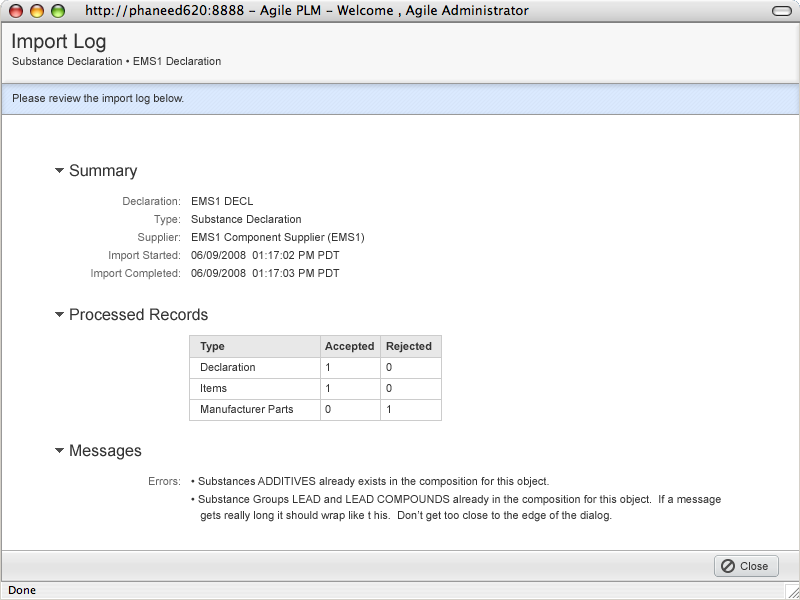
<style>
.page{position:relative;width:800px;height:600px;background:#ffffff}
.page>*{position:absolute;margin:0}
.t1{font:20px "ArialMT";color:#333333}
.t2{font:11px "ArialMT";color:#333333}
.t3{font:16px "ArialMT";color:#333333}
.t4{font:11px/18px "ArialMT";color:#666666}
.t5{font:11px/18px "ArialMT";color:#333333}
.t6{font:11px/21px "ArialMT";color:#333333}
.t7{font:11px/21px "Arial-BoldMT";color:#333333}
.t8{font:11px "ArialMT";color:#666666}
.t9{font:11px/16px "ArialMT";color:#333333}
</style>
<div class="page">
<p class="t1" style="left:12px;top:33px;width:94px;height:20px">Import Log</p>
<p class="t2" style="left:12px;top:57px;width:209px;height:8px">Substance Declaration • EMS1 Declaration</p>
<p class="t2" style="left:13px;top:94px;width:171px;height:11px">Please review the import log below.</p>
<p class="t3" style="left:69px;top:164px;width:69px;height:16px">Summary</p>
<p class="t4" style="left:91px;top:197px;width:89px;height:83px;text-align:right">Declaration:<br>Type:<br>Supplier:<br>Import Started:<br>Import Completed:</p>
<p class="t5" style="left:191px;top:197px;width:173px;height:80px">EMS1 DECL<br>Substance Declaration<br>EMS1 Component Supplier (EMS1)<br>06/09/2008  01:17:02 PM PDT<br>06/09/2008  01:17:03 PM PDT</p>
<p class="t3" style="left:70px;top:308px;width:138px;height:13px">Processed Records</p>
<p class="t6" style="left:200px;top:342px;width:93px;height:71px"><span class="t7">Type<br></span>Declaration<br>Items<br>Manufacturer Parts</p>
<p class="t7" style="left:325px;top:342px;width:49px;height:71px">Accepted<br><span class="t6">1<br>1<br>0</span></p>
<p class="t7" style="left:386px;top:342px;width:46px;height:71px">Rejected<br><span class="t6">0<br>0<br>1</span></p>
<p class="t3" style="left:70px;top:444px;width:72px;height:16px">Messages</p>
<p class="t8" style="left:149px;top:477px;width:31px;height:8px">Errors:</p>
<p class="t5" style="left:191px;top:477px;width:530px;height:45px">• Substances ADDITIVES already exists in the composition for this object.<br>• Substance Groups LEAD and LEAD COMPOUNDS already in the composition for this object.  If a message<br><span class="t9">   gets really long it should wrap like t his.  Don’t get too close to the edge of the dialog.</span></p>
<p class="t2" style="left:740px;top:562px;width:28px;height:8px">Close</p>
</div>
